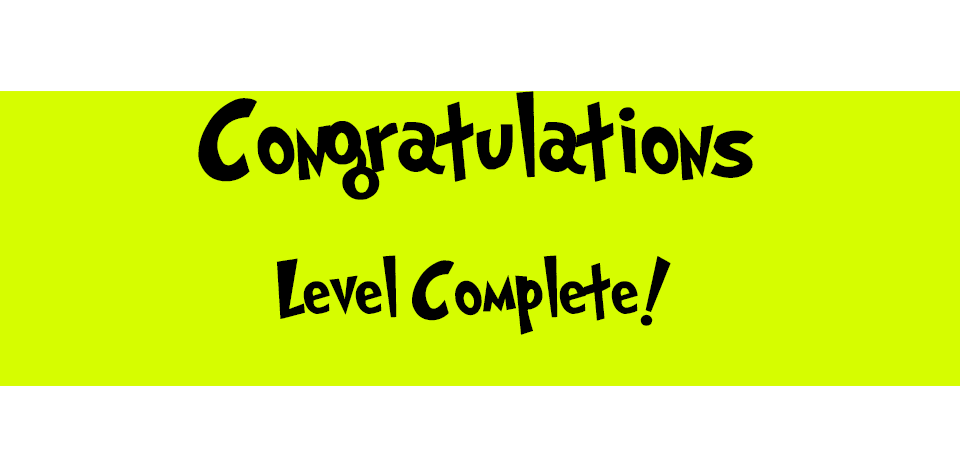
<style>
.page{position:relative;width:960px;height:450px;background:#d6fd00}
.page>*{position:absolute;margin:0}
.t1{font:100px "Grinched";color:#000000}
.t2{font:72px "Grinched";color:#000000}
</style>
<div class="page">
<p class="t1" style="left:198px;top:91px;width:556px;height:109px">Congratulations</p>
<p class="t2" style="left:276px;top:255px;width:395px;height:80px">Level Complete!</p>
</div>
